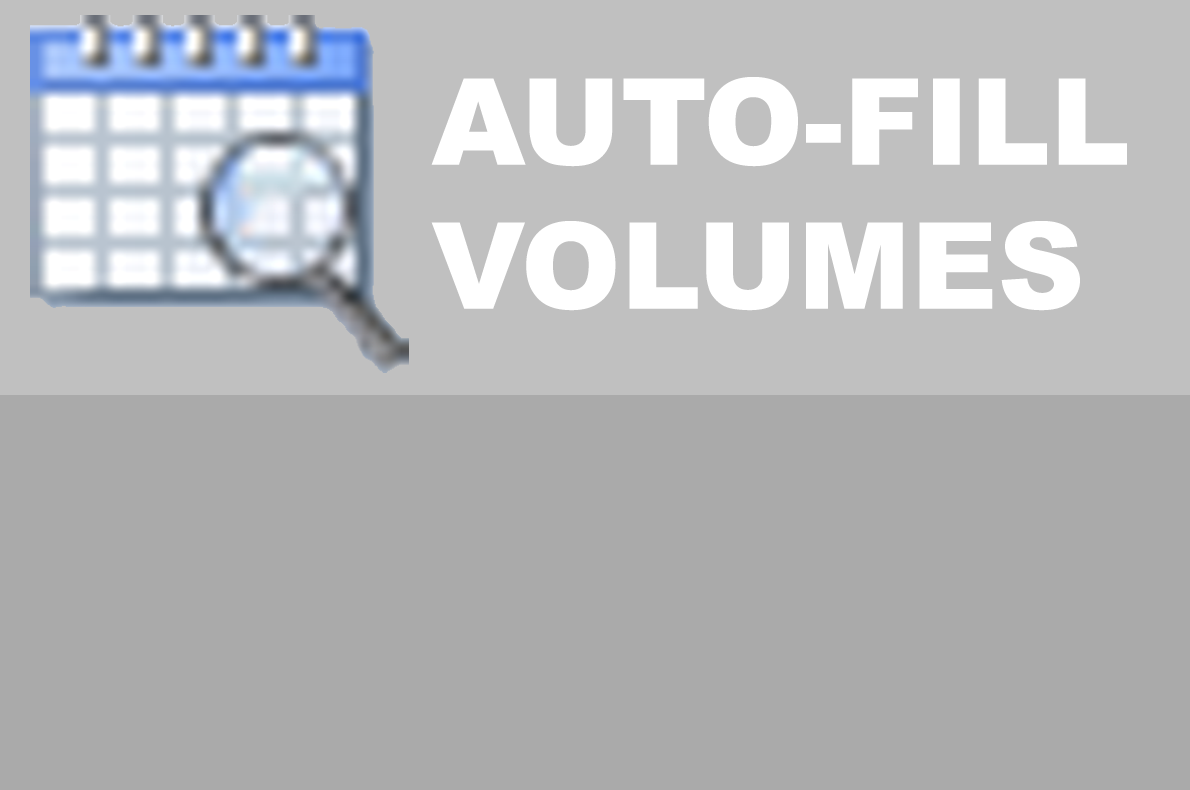
<style>
.page{position:relative;width:1190px;height:790px;background:#aaaaaa}
.page>*{position:absolute;margin:0}
.t1{font:120px "Arial-Black";color:#ffffff}
</style>
<div class="page">
<p class="t1" style="left:431px;top:77px;width:696px;height:234px">AUTO-FILL<br>VOLUMES</p>
</div>
